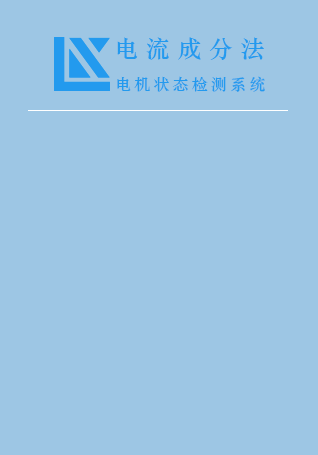
<style>
.page{position:relative;width:318px;height:455px;background:#9dc6e4}
.page>*{position:absolute;margin:0}
.t1{font:24px "STZhongsong";letter-spacing:0.32em;color:#239aee}
.t2{font:16px "STZhongsong";letter-spacing:0.2em;color:#239aee}
</style>
<div class="page">
<p class="t1" style="left:117px;top:37px;width:147px;height:23px">电流成分法</p>
<p class="t2" style="left:117px;top:76px;width:148px;height:16px">电机状态检测系统</p>
</div>
